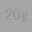
<style>
.page{position:relative;width:32px;height:32px;background:#a6a6a6}
.page>*{position:absolute;margin:0}
.t1{font:14px "HGSGothicE";color:#969696}
</style>
<div class="page">
<p class="t1" style="left:6px;top:9px;width:22px;height:13px">20g</p>
</div>
